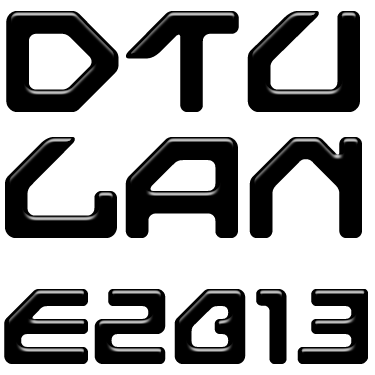
<style>
.page{position:relative;width:375px;height:375px;background:#ffffff}
.page>*{position:absolute;margin:0}
.t1{font:150px/126px "NextGames";letter-spacing:-0.025em;color:#000000}
.t2{font:112px/126px "NextGames";letter-spacing:-0.025em;color:#000000}
</style>
<div class="page">
<p class="t1" style="left:4px;top:11px;width:364px;height:353px">DTU<br>LAN<br><span class="t2">E2013</span></p>
</div>
